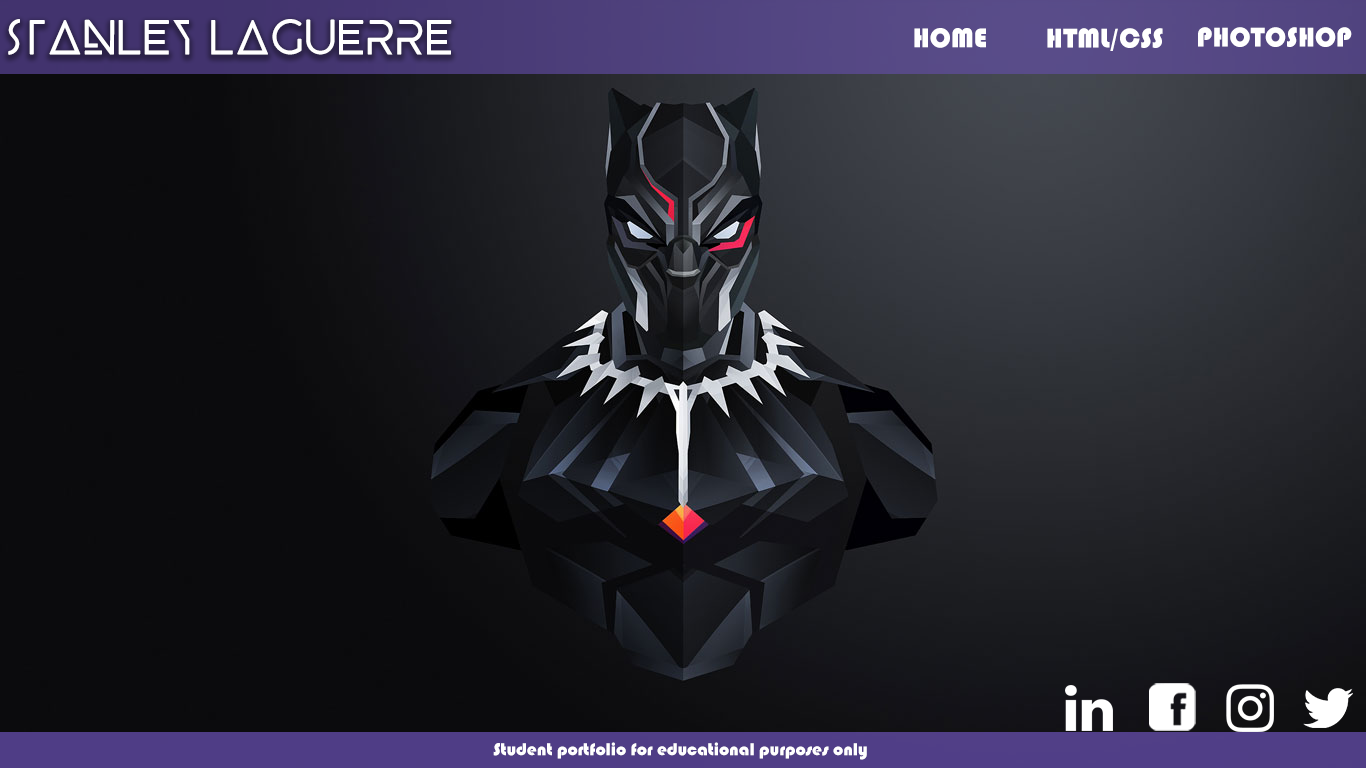
<style>
.page{position:relative;width:1366px;height:768px;background:#0b0b0d}
.page>*{position:absolute;margin:0}
.t1{font:48px "BEYNO";color:#ffffff}
.t2{font:28px "Bauhaus93";color:#ffffff;text-transform:uppercase}
.t3{font:28px "Bauhaus93";color:#ffffff}
.t4{font:18px "Bauhaus93";color:#ffffff}
</style>
<div class="page">
<p class="t1" style="left:8px;top:19px;width:444px;height:36px">Stanley Laguerre</p>
<p class="t2" style="left:914px;top:28px;width:72px;height:20px">Home</p>
<p class="t3" style="left:1047px;top:28px;width:116px;height:23px">HTML/CSS</p>
<p class="t3" style="left:1198px;top:27px;width:154px;height:20px">PHOTOSHOP</p>
<p class="t4" style="left:493px;top:742px;width:374px;height:18px">Student portfolio for educational purposes only</p>
</div>
